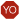
<style>
.page{position:relative;width:19px;height:19px;background:#ac2113}
.page>*{position:absolute;margin:0}
.t1{font:10px "Lato-Light"}
</style>
<div class="page">
<p class="t1" style="left:3px;top:6px;width:14px;height:8px">YO</p>
</div>
